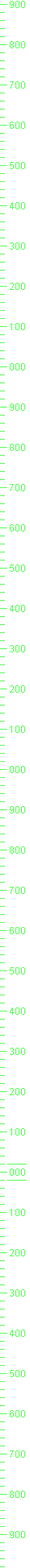
<style>
.page{position:relative;width:30px;height:1568px;background:#ffffff}
.page>*{position:absolute;margin:0}
.t1{font:9.7px "ArialMT";color:#55ff55}
</style>
<div class="page">
<p class="t1" style="left:10px;top:1px;width:15px;height:7px">900</p>
<p class="t1" style="left:10px;top:41px;width:15px;height:7px">800</p>
<p class="t1" style="left:10px;top:81px;width:15px;height:8px">700</p>
<p class="t1" style="left:10px;top:122px;width:15px;height:7px">600</p>
<p class="t1" style="left:10px;top:162px;width:15px;height:7px">500</p>
<p class="t1" style="left:10px;top:202px;width:15px;height:7px">400</p>
<p class="t1" style="left:10px;top:242px;width:15px;height:8px">300</p>
<p class="t1" style="left:10px;top:283px;width:15px;height:7px">200</p>
<p class="t1" style="left:10px;top:323px;width:15px;height:7px">100</p>
<p class="t1" style="left:10px;top:363px;width:15px;height:7px">000</p>
<p class="t1" style="left:10px;top:403px;width:15px;height:8px">900</p>
<p class="t1" style="left:10px;top:444px;width:15px;height:7px">800</p>
<p class="t1" style="left:10px;top:484px;width:15px;height:7px">700</p>
<p class="t1" style="left:10px;top:524px;width:15px;height:8px">600</p>
<p class="t1" style="left:10px;top:565px;width:15px;height:7px">500</p>
<p class="t1" style="left:10px;top:605px;width:15px;height:7px">400</p>
<p class="t1" style="left:10px;top:645px;width:15px;height:7px">300</p>
<p class="t1" style="left:10px;top:685px;width:15px;height:8px">200</p>
<p class="t1" style="left:10px;top:726px;width:15px;height:7px">100</p>
<p class="t1" style="left:10px;top:766px;width:15px;height:7px">000</p>
<p class="t1" style="left:10px;top:806px;width:15px;height:7px">900</p>
<p class="t1" style="left:10px;top:846px;width:15px;height:8px">800</p>
<p class="t1" style="left:10px;top:887px;width:15px;height:7px">700</p>
<p class="t1" style="left:10px;top:927px;width:15px;height:7px">600</p>
<p class="t1" style="left:10px;top:967px;width:15px;height:7px">500</p>
<p class="t1" style="left:10px;top:1007px;width:15px;height:8px">400</p>
<p class="t1" style="left:10px;top:1048px;width:15px;height:7px">300</p>
<p class="t1" style="left:10px;top:1088px;width:15px;height:7px">200</p>
<p class="t1" style="left:10px;top:1128px;width:15px;height:8px">100</p>
<p class="t1" style="left:10px;top:1169px;width:15px;height:7px">000</p>
<p class="t1" style="left:10px;top:1209px;width:15px;height:7px">100</p>
<p class="t1" style="left:10px;top:1249px;width:15px;height:7px">200</p>
<p class="t1" style="left:10px;top:1289px;width:15px;height:8px">300</p>
<p class="t1" style="left:10px;top:1330px;width:15px;height:7px">400</p>
<p class="t1" style="left:10px;top:1370px;width:15px;height:7px">500</p>
<p class="t1" style="left:10px;top:1410px;width:15px;height:7px">600</p>
<p class="t1" style="left:10px;top:1450px;width:15px;height:8px">700</p>
<p class="t1" style="left:10px;top:1491px;width:15px;height:7px">800</p>
<p class="t1" style="left:10px;top:1531px;width:15px;height:7px">900</p>
</div>
